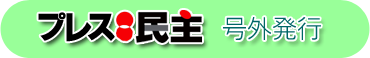
<style>
.page{position:relative;width:370px;height:58px;background:#99ff99}
.page>*{position:absolute;margin:0}
.t1{font:30px "HGSKasaneKakugothicH";letter-spacing:-0.24em;color:#000000}
.t2{font:30px "HGSKasaneKakugothicH";letter-spacing:-0.075em;color:#000000}
.t3{font:25px "NfMotoyaCedar-W1-90mskp-RKSJ-H";color:#006666}
</style>
<div class="page">
<p class="t1" style="left:38px;top:12px;width:77px;height:30px"><span class="t2">プ</span>レス</p>
<p class="t3" style="left:223px;top:17px;width:98px;height:23px">号外発行</p>
</div>
